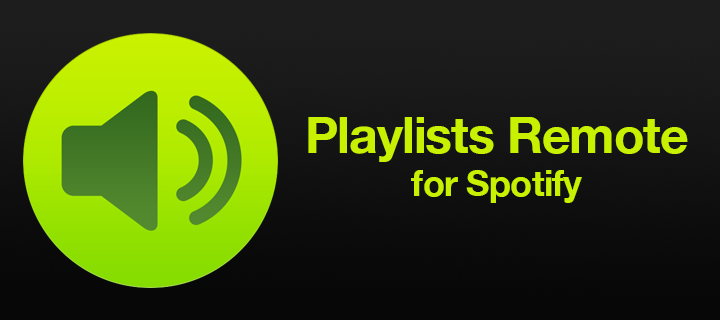
<style>
.page{position:relative;width:720px;height:320px}
.page>*{position:absolute;margin:0}
.t1{font:50px "HelveticaNeue-Bold";letter-spacing:-0.02em;color:#c7f100}
.t2{font:36px "HelveticaNeue-Bold";letter-spacing:-0.02em;color:#c7f100}
</style>
<div class="page">
<p class="t1" style="left:308px;top:117px;width:380px;height:86px;text-align:center">Playlists Remote<br><span class="t2">for Spotify</span></p>
</div>
